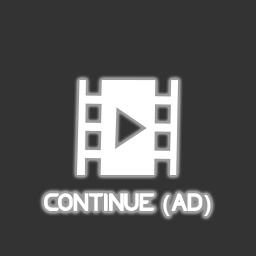
<style>
.page{position:relative;width:256px;height:256px;background:#333333}
.page>*{position:absolute;margin:0}
.t1{font:24px "TECHNIQUE";color:#ffffff}
.t2{font:24px "Xolonium";color:#ffffff}
</style>
<div class="page">
<p class="t1" style="left:44px;top:193px;width:167px;height:23px">continue <span class="t2">(</span>ad<span class="t2">)</span></p>
</div>
